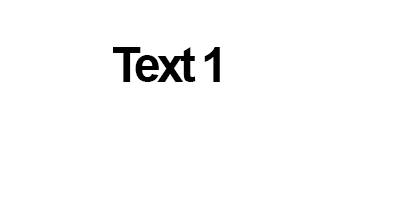
<style>
.page{position:relative;width:400px;height:200px;background:#ffffff}
.page>*{position:absolute;margin:0}
.t1{font:48px "Arial-BoldMT";letter-spacing:-0.08em;color:#000000}
</style>
<div class="page">
<p class="t1" style="left:113px;top:47px;width:107px;height:35px">Text 1</p>
</div>
